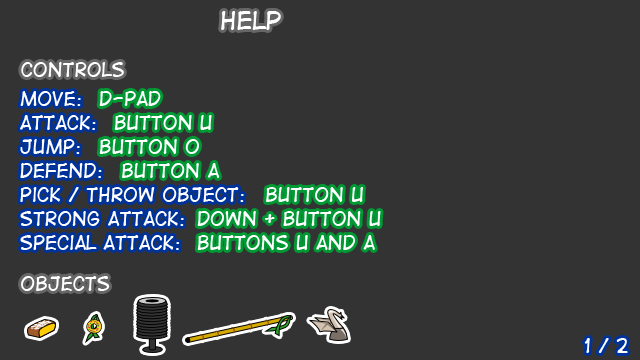
<style>
.page{position:relative;width:640px;height:360px;background:#333333}
.page>*{position:absolute;margin:0}
.t1{font:24px "DigitalStrip";color:#ffffff}
.t2{font:18px "DigitalStrip";color:#ffffff}
.t3{font:18px/24px "DigitalStrip";color:#ffffff}
</style>
<div class="page">
<p class="t1" style="left:221px;top:11px;width:60px;height:19px">help</p>
<p class="t2" style="left:21px;top:62px;width:103px;height:15px">controls</p>
<p class="t3" style="left:20px;top:91px;width:224px;height:159px">move:<br>attack:<br>jump:<br>Defend:<br>pick / throw object:<br>strong attack:<br>special attack:</p>
<p class="t3" style="left:99px;top:91px;width:282px;height:159px">d-pad<br>     button U<br>   button O<br>      Button A<br>          button u<br>                        down + button U<br>                        buttons U and A</p>
<p class="t2" style="left:21px;top:276px;width:89px;height:15px">objects</p>
<p class="t2" style="left:584px;top:338px;width:44px;height:15px">1 / 2</p>
</div>
